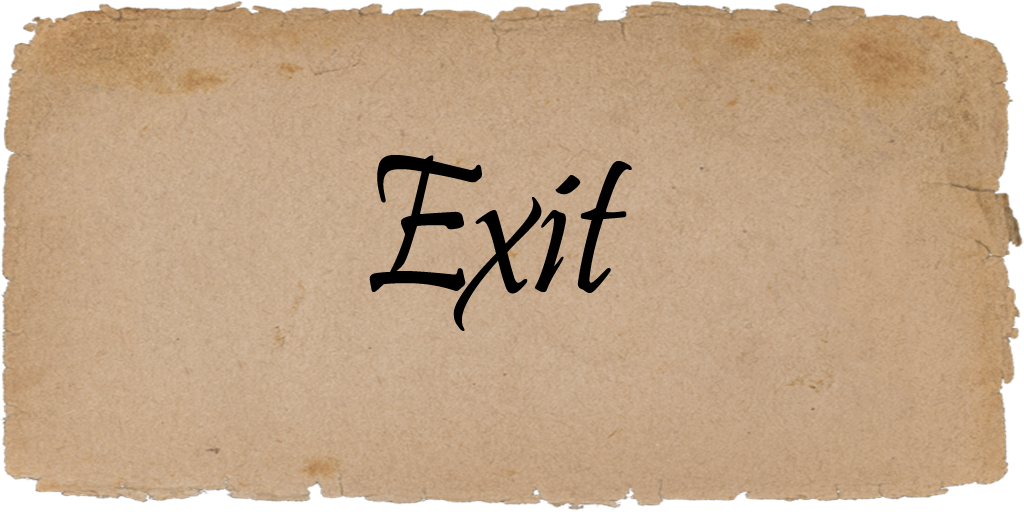
<style>
.page{position:relative;width:1024px;height:512px}
.page>*{position:absolute;margin:0}
.t1{font:202.3px "Pristina-Regular";color:#000000;scale:0.95 1}
</style>
<div class="page">
<p class="t1" style="left:369px;top:154px;width:263px;height:177px">Exit</p>
</div>
